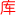
<style>
.page{position:relative;width:16px;height:16px;background:#ffffff}
.page>*{position:absolute;margin:0}
.t1{font:16px "YouYuan";color:#ff0000}
</style>
<div class="page">
<p class="t1" style="left:0px;top:0px;width:16px;height:15px">库</p>
</div>
